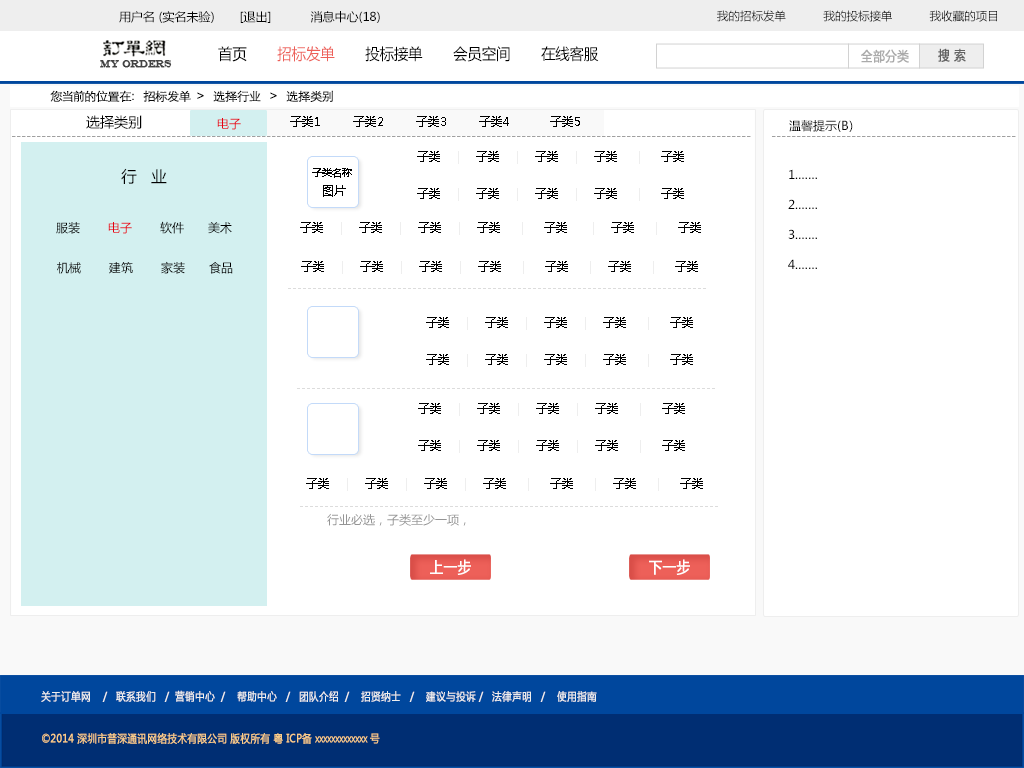
<style>
.page{position:relative;width:1024px;height:768px;background:#ffffff}
.page>*{position:absolute;margin:0}
.t1{font:12px "MicrosoftYaHei";color:#000000}
.t2{font:11.5px "MicrosoftYaHei";color:#000000}
.t3{font:15.4px "MicrosoftYaHei";color:#000000;font-variant:small-caps;scale:0.94 1}
.t4{font:15.4px "MicrosoftYaHei";color:#ed6059;font-variant:small-caps;scale:0.94 1}
.t5{font:13.2px "MicrosoftYaHei";color:#aaaaaa;font-variant:small-caps;font-weight:bold;scale:0.86 1}
.t6{font:13.2px "MicrosoftYaHei";color:#626262;font-variant:small-caps;font-weight:bold;scale:0.86 1}
.t7{font:9.9px "EngraversMT";color:#434343;font-variant:small-caps;font-weight:bold;scale:0.86 1}
.t8{font:12px "STXihei";color:#060606;scale:1.04 1}
.t9{font:14px "MicrosoftYaHei";color:#000000}
.t10{font:12px "MicrosoftYaHei";color:#e60012}
.t11{font:12px "MicrosoftYaHei";color:#a0a0a0}
.t12{font:11.5px "MicrosoftYaHei";color:#eeeeee}
.t13{font:15.8px "MicrosoftYaHei";color:#010101}
.t14{font:10px/17px "MicrosoftYaHei";color:#000000}
.t15{font:12px/17px "MicrosoftYaHei";color:#000000}
.t16{font:12px/30px "MicrosoftYaHei";color:#000000}
.t17{font:11.5px "MicrosoftYaHei";color:#dcdcdc}
.t18{font:12px "MicrosoftYaHei";color:#959595}
.t19{font:15.4px "MicrosoftYaHei";color:#ffffff;font-variant:small-caps;font-weight:bold;scale:0.86 1}
.t20{font:11px "MicrosoftYaHei";color:#eeeeee;font-variant:small-caps;font-weight:bold;scale:0.86 1}
.t21{font:15.4px "STXihei";color:#eeeeee;font-variant:small-caps;font-weight:bold;scale:0.86 1}
.t22{font:11px "MicrosoftYaHei";color:#facd89;font-variant:small-caps;font-weight:bold;scale:0.87 1}
.t23{font:11px "MicrosoftYaHei";color:#eeeeee;font-variant:small-caps;font-weight:bold;scale:0.87 1}
</style>
<div class="page">
<p class="t1" style="left:119px;top:11px;width:261px;height:12px">用户名 (实名未验)       [退出]           消息中心(18)</p>
<p class="t2" style="left:717px;top:10px;width:280px;height:12px">我的招标发单           我的投标接单           我收藏的项目</p>
<p class="t3" style="left:218px;top:46px;width:381px;height:16px">首页       <span class="t4">招标发单</span>       投标接单       会员空间       在线客服</p>
<p class="t5" style="left:861px;top:49px;width:48px;height:14px">全部分类</p>
<p class="t6" style="left:938px;top:48px;width:28px;height:14px">搜 索</p>
<p class="t7" style="left:100px;top:60px;width:72px;height:8px">MY ORDERS</p>
<p class="t8" style="left:50px;top:90px;width:283px;height:12px">您当前的位置在：  招标发单  &gt;   选择行业   &gt;   选择类别</p>
<p class="t9" style="left:86px;top:115px;width:56px;height:14px">选择类别</p>
<p class="t10" style="left:217px;top:118px;width:24px;height:12px">电子</p>
<p class="t2" style="left:290px;top:116px;width:290px;height:11px"><span class="t9">                    </span> 子类1        子类2        子类3        子类4          子类5</p>
<p class="t1" style="left:789px;top:120px;width:64px;height:12px">温馨提示(B)</p>
<p class="t11" style="left:12px;top:136px;width:739px;height:1px">----------------------------------------------------------------------------------------------------------------------------------------------------</p>
<p class="t11" style="left:772px;top:136px;width:244px;height:1px">-------------------------------------------------</p>
<p class="t2" style="left:417px;top:151px;width:267px;height:13px"><span class="t9">                    </span> 子类   <span class="t12"> |    </span>子类    <span class="t12">|    </span>子类    <span class="t12">|    </span>子类     <span class="t12">|     </span>子类</p>
<p class="t13" style="left:121px;top:168px;width:46px;height:16px">行   业</p>
<p class="t14" style="left:312px;top:168px;width:40px;height:29px;text-align:center">子类名称<br><span class="t15"> 图片</span></p>
<p class="t16" style="left:788px;top:169px;width:29px;height:100px">1.……<br>2.……<br>3.……<br>4.……</p>
<p class="t2" style="left:417px;top:188px;width:267px;height:13px"><span class="t9">                    </span> 子类   <span class="t12"> |    </span>子类    <span class="t12">|    </span>子类    <span class="t12">|    </span>子类     <span class="t12">|     </span>子类</p>
<p class="t1" style="left:56px;top:221px;width:176px;height:13px">服装       <span class="t10">电子</span>       软件      美术</p>
<p class="t2" style="left:300px;top:222px;width:401px;height:13px"><span class="t9">                    </span> 子类   <span class="t12"> |    </span>子类    <span class="t12">|    </span>子类    <span class="t12">|    </span>子类     <span class="t12">|     </span>子类      <span class="t12">|    </span>子类     <span class="t12">|     </span>子类</p>
<p class="t1" style="left:57px;top:261px;width:176px;height:13px">机械       建筑       家装      食品</p>
<p class="t2" style="left:301px;top:261px;width:397px;height:13px"><span class="t9">                    </span> 子类   <span class="t12"> |    </span>子类    <span class="t12">|    </span>子类    <span class="t12">|    </span>子类     <span class="t12">|     </span>子类     <span class="t12">|    </span>子类     <span class="t12">|     </span>子类</p>
<p class="t17" style="left:288px;top:288px;width:418px;height:1px">------------------------------------------------------------------------------------</p>
<p class="t2" style="left:426px;top:317px;width:267px;height:13px"><span class="t9">                    </span> 子类   <span class="t12"> |    </span>子类    <span class="t12">|    </span>子类    <span class="t12">|    </span>子类     <span class="t12">|     </span>子类</p>
<p class="t2" style="left:426px;top:354px;width:267px;height:13px"><span class="t9">                    </span> 子类   <span class="t12"> |    </span>子类    <span class="t12">|    </span>子类    <span class="t12">|    </span>子类     <span class="t12">|     </span>子类</p>
<p class="t17" style="left:297px;top:388px;width:418px;height:1px">------------------------------------------------------------------------------------</p>
<p class="t2" style="left:418px;top:403px;width:267px;height:13px"><span class="t9">                    </span> 子类   <span class="t12"> |    </span>子类    <span class="t12">|    </span>子类    <span class="t12">|    </span>子类     <span class="t12">|     </span>子类</p>
<p class="t2" style="left:418px;top:440px;width:267px;height:13px"><span class="t9">                    </span> 子类   <span class="t12"> |    </span>子类    <span class="t12">|    </span>子类    <span class="t12">|    </span>子类     <span class="t12">|     </span>子类</p>
<p class="t2" style="left:306px;top:478px;width:397px;height:13px"><span class="t9">                    </span> 子类   <span class="t12"> |    </span>子类    <span class="t12">|    </span>子类    <span class="t12">|    </span>子类     <span class="t12">|     </span>子类     <span class="t12">|    </span>子类     <span class="t12">|     </span>子类</p>
<p class="t17" style="left:300px;top:506px;width:418px;height:1px">------------------------------------------------------------------------------------</p>
<p class="t18" style="left:327px;top:513px;width:139px;height:13px">行业必选，子类至少一项，</p>
<p class="t19" style="left:430px;top:559px;width:41px;height:16px">上一步</p>
<p class="t19" style="left:649px;top:559px;width:41px;height:16px">下一步</p>
<p class="t20" style="left:41px;top:690px;width:556px;height:12px"><span class="t21"><br><br></span>关于订单网    /   联系我们   /  营销中心  /    帮助中心   /   团队介绍  /    招贤纳士   /    建议与投诉 /   法律声明   /    使用指南</p>
<p class="t22" style="left:42px;top:733px;width:338px;height:11px"><span class="t23"> </span>©2014 深圳市普深通讯网络技术有限公司 版权所有 粤 ICP备 xxxxxxxxxxxxx 号</p>
</div>
